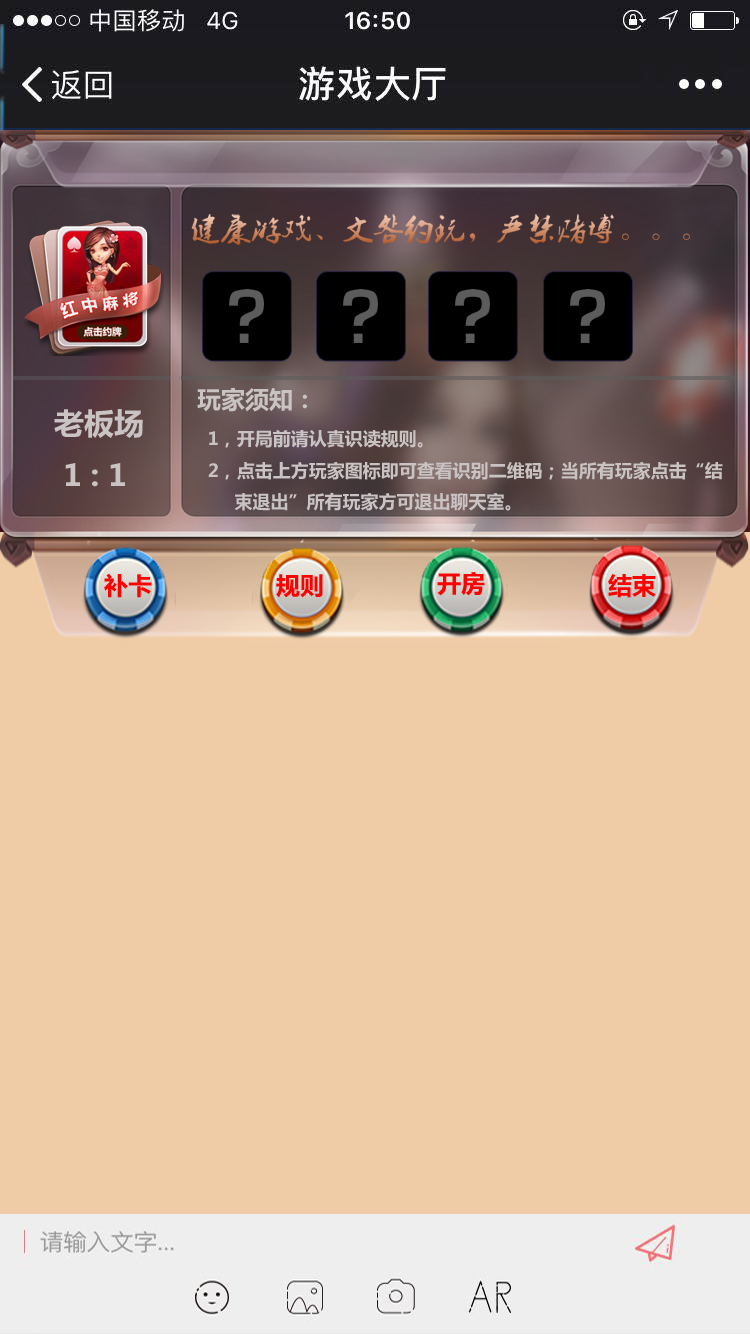
<style>
.page{position:relative;width:750px;height:1334px;background:#f0cca6}
.page>*{position:absolute;margin:0}
.t1{font:18px "MicrosoftYaHei-Bold";color:#c9c3c3}
.t2{font:24px "MicrosoftYaHei-Bold";color:#c9c3c3}
.t3{font:30px "MicrosoftYaHei-Bold";color:#c9c3c3}
.t4{font:24px "MicrosoftYaHei-Bold";color:#ff0000}
</style>
<div class="page">
<p class="t1" style="left:197px;top:387px;width:526px;height:124px"><span class="t2">玩家须知：<br></span>  1，开局前请认真识读规则。<br>  2，点击上方玩家图标即可查看识别二维码；当所有玩家点击“结<br>       束退出”所有玩家方可退出聊天室。</p>
<p class="t3" style="left:54px;top:409px;width:89px;height:78px">老板场<br> 1 : 1</p>
<p class="t4" style="left:104px;top:573px;width:48px;height:25px">补卡</p>
<p class="t4" style="left:276px;top:574px;width:47px;height:24px">规则</p>
<p class="t4" style="left:437px;top:572px;width:48px;height:24px">开房</p>
<p class="t4" style="left:608px;top:574px;width:48px;height:24px">结束</p>
</div>
